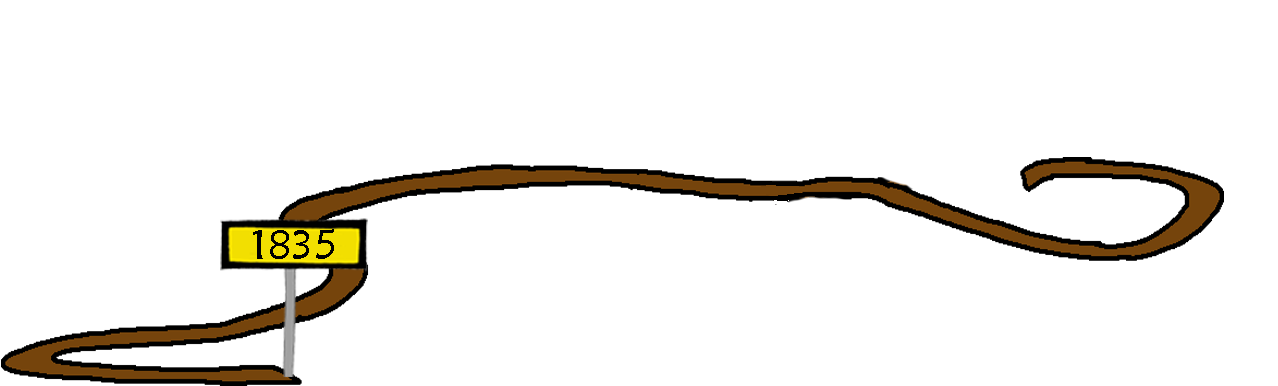
<style>
.page{position:relative;width:1278px;height:386px;background:#ffffff}
.page>*{position:absolute;margin:0}
.t1{font:41.7px "MaiandraGD-Regular";color:#000000}
</style>
<div class="page">
<p class="t1" style="left:253px;top:229px;width:81px;height:30px">1835</p>
</div>
